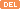
<style>
.page{position:relative;width:20px;height:9px}
.page>*{position:absolute;margin:0}
.t1{font:8px "Kroeger0555";color:#ffffff;text-transform:uppercase}
</style>
<div class="page">
<p class="t1" style="left:4px;top:2px;width:13px;height:5px">del</p>
</div>
